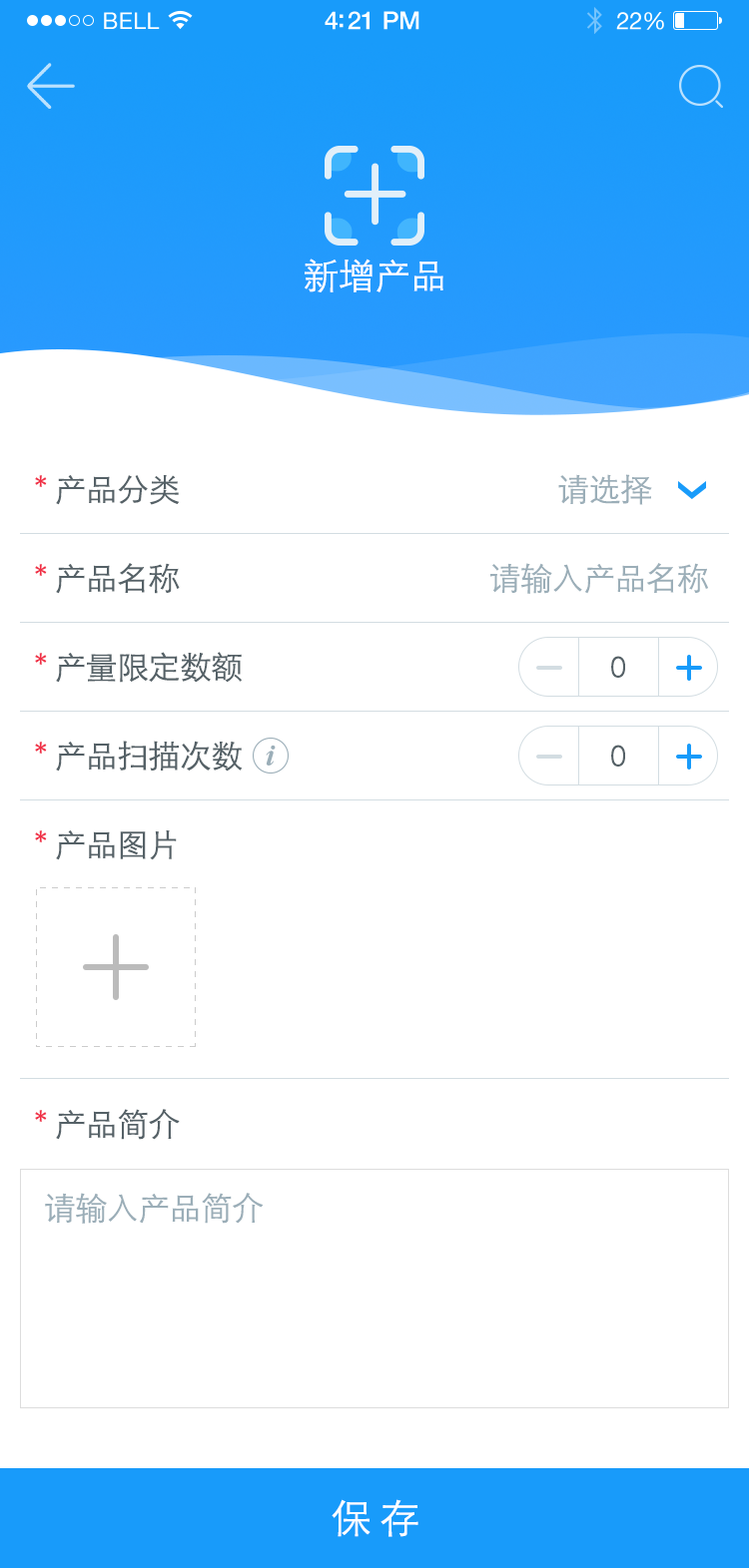
<style>
.page{position:relative;width:749px;height:1568px;background:#ffffff}
.page>*{position:absolute;margin:0}
.t1{font:35.9px "STXihei";color:#ffffff}
.t2{font:31.9px "STXihei";letter-spacing:-0.02em;color:#556167}
.t3{font:31.9px "STXihei";letter-spacing:-0.02em;color:#f03047}
.t4{font:31.9px "STXihei";letter-spacing:-0.02em;color:#9baeb8}
.t5{font:27.9px "STXihei";letter-spacing:-0.02em;color:#556167}
.t6{font:39.9px "STXihei";letter-spacing:-0.02em;color:#ffffff}
</style>
<div class="page">
<p class="t1" style="left:304px;top:259px;width:139px;height:33px">新增产品</p>
<p class="t2" style="left:35px;top:475px;width:145px;height:30px"><span class="t3">* </span>产品分类</p>
<p class="t4" style="left:558px;top:474px;width:94px;height:31px">请选择</p>
<p class="t2" style="left:35px;top:563px;width:145px;height:31px"><span class="t3">* </span>产品名称</p>
<p class="t4" style="left:490px;top:563px;width:218px;height:31px">请输入产品名称</p>
<p class="t2" style="left:35px;top:652px;width:207px;height:31px"><span class="t3">* </span>产量限定数额</p>
<p class="t5" style="left:611px;top:656px;width:14px;height:22px">0</p>
<p class="t2" style="left:35px;top:741px;width:208px;height:31px"><span class="t3">* </span>产品扫描次数</p>
<p class="t5" style="left:611px;top:745px;width:14px;height:22px">0</p>
<p class="t2" style="left:35px;top:829px;width:142px;height:31px"><span class="t3">* </span>产品图片</p>
<p class="t2" style="left:35px;top:1109px;width:145px;height:31px"><span class="t3">* </span>产品简介</p>
<p class="t4" style="left:45px;top:1193px;width:218px;height:31px">请输入产品简介</p>
<p class="t6" style="left:331px;top:1499px;width:87px;height:38px">保 存</p>
</div>
